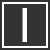
<style>
.page{position:relative;width:50px;height:50px;background:#333333}
.page>*{position:absolute;margin:0}
.t1{font:12px "MyriadPro-Regular";color:#ffffff}
</style>
<div class="page">
<p class="t1" style="left:22px;top:8px;width:5px;height:34px">I</p>
</div>
